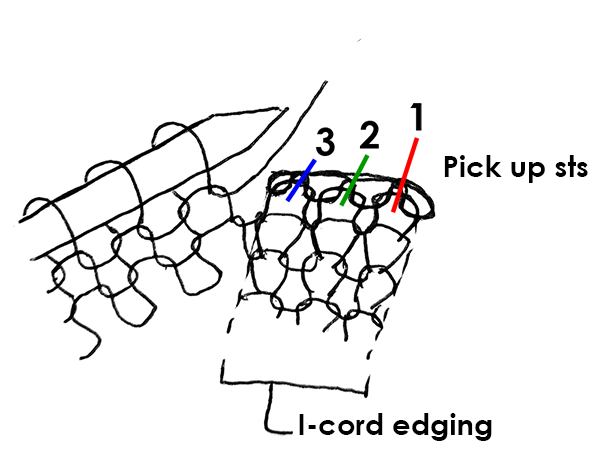
<style>
.page{position:relative;width:600px;height:450px;background:#ffffff}
.page>*{position:absolute;margin:0}
.t1{font:29.2px "CenturyGothic-Bold";color:#000000}
</style>
<div class="page">
<p class="t1" style="left:444px;top:155px;width:144px;height:28px">Pick up sts</p>
<p class="t1" style="left:299px;top:413px;width:193px;height:28px">I-cord edging</p>
</div>
